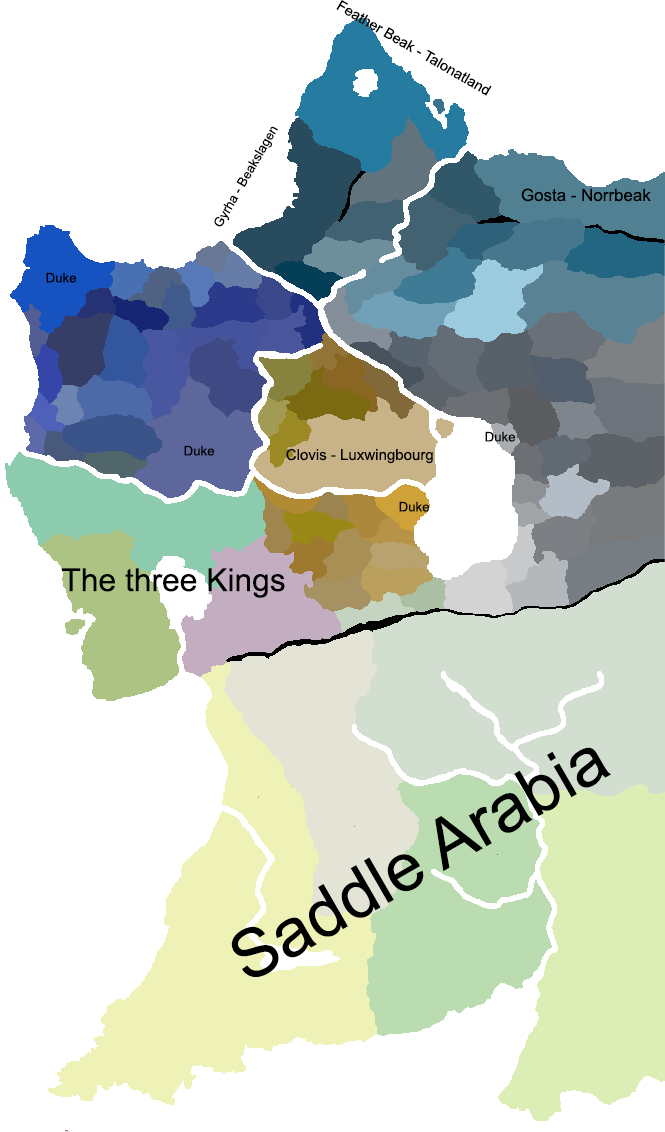
<style>
.page{position:relative;width:665px;height:1132px;background:#ffffff}
.page>*{position:absolute;margin:0}
.t1{font:14.6px "ArialMT";color:#000000}
.t2{font:13px "ArialMT";color:#000000}
.t3{font:16.9px "ArialMT";color:#000000}
.t4{font:13.2px "ArialMT";color:#000000}
.t5{font:15px "ArialMT";color:#000000}
.t6{font:31.8px "ArialMT";color:#000000}
.t7{font:67.9px "ArialMT";color:#000000}
</style>
<div class="page">
<p class="t1" style="left:336px;top:0px;width:156px;height:96px;rotate:30deg">Feather Beak - Talonatland</p>
<p class="t2" style="left:214px;top:126px;width:64px;height:101px;rotate:-60deg">Gyrha - Beakslagen</p>
<p class="t3" style="left:521px;top:188px;width:130px;height:14px">Gosta - Norrbeak</p>
<p class="t4" style="left:46px;top:272px;width:31px;height:11px">Duke</p>
<p class="t4" style="left:485px;top:431px;width:31px;height:11px">Duke</p>
<p class="t4" style="left:184px;top:445px;width:31px;height:11px">Duke</p>
<p class="t5" style="left:286px;top:448px;width:147px;height:16px">Clovis - Luxwingbourg</p>
<p class="t4" style="left:399px;top:501px;width:31px;height:11px">Duke</p>
<p class="t6" style="left:62px;top:568px;width:223px;height:30px">The three Kings</p>
<p class="t7" style="left:231px;top:747px;width:380px;height:230px;rotate:-30deg">Saddle Arabia</p>
</div>
